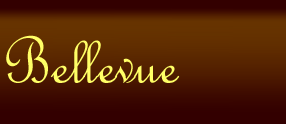
<style>
.page{position:relative;width:286px;height:124px}
.page>*{position:absolute;margin:0}
.t1{font:71.7px "FrenchScriptMT";color:#ffff66}
</style>
<div class="page">
<p class="t1" style="left:6px;top:35px;width:174px;height:48px">Bellevue</p>
</div>
